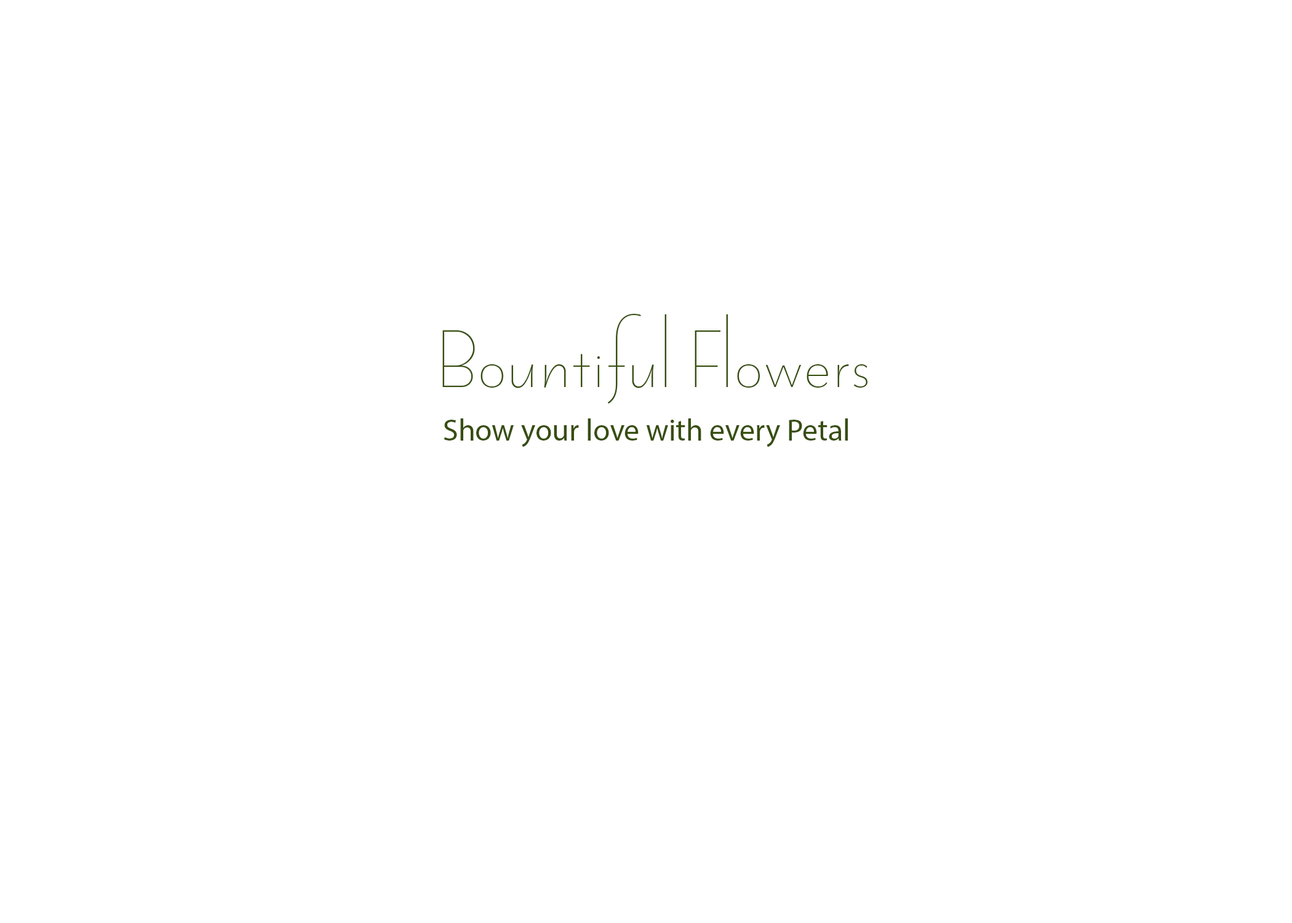
<style>
.page{position:relative;width:1292px;height:923px;background:#ffffff}
.page>*{position:absolute;margin:0}
.t1{font:92.3px "Penna";color:#374e10}
.t2{font:30.8px "MyriadPro-Regular";color:#374e10}
</style>
<div class="page">
<p class="t1" style="left:442px;top:314px;width:426px;height:90px">Bountiful Flowers</p>
<p class="t2" style="left:444px;top:418px;width:404px;height:29px">Show your love with every Petal</p>
</div>
